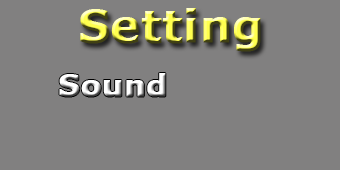
<style>
.page{position:relative;width:340px;height:170px;background:#818080}
.page>*{position:absolute;margin:0}
.t1{font:44px "Verdana-Bold";font-weight:bold}
.t2{font:30px "Verdana-Bold";font-weight:bold}
</style>
<div class="page">
<p class="t1" style="left:80px;top:8px;width:181px;height:44px">Setting</p>
<p class="t2" style="left:59px;top:73px;width:107px;height:24px">Sound</p>
</div>
